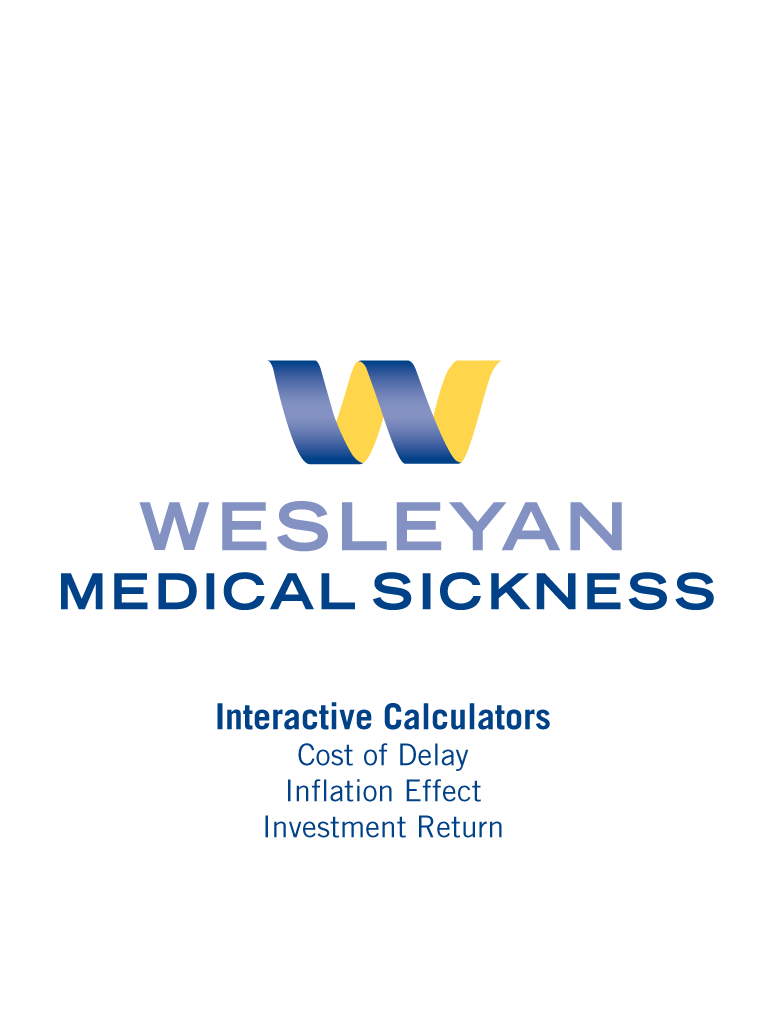
<style>
.page{position:relative;width:768px;height:1024px;background:#ffffff}
.page>*{position:absolute;margin:0}
.t1{font:30px "TradeGothicLT";color:#004188}
.t2{font:36px "TradeGothicLT-Bold";color:#004188}
</style>
<div class="page">
<p class="t1" style="left:217px;top:702px;width:333px;height:136px;text-align:center"><span class="t2">Interactive Calculators<br></span>Cost of Delay<br>Inflation Effect<br>Investment Return</p>
</div>
